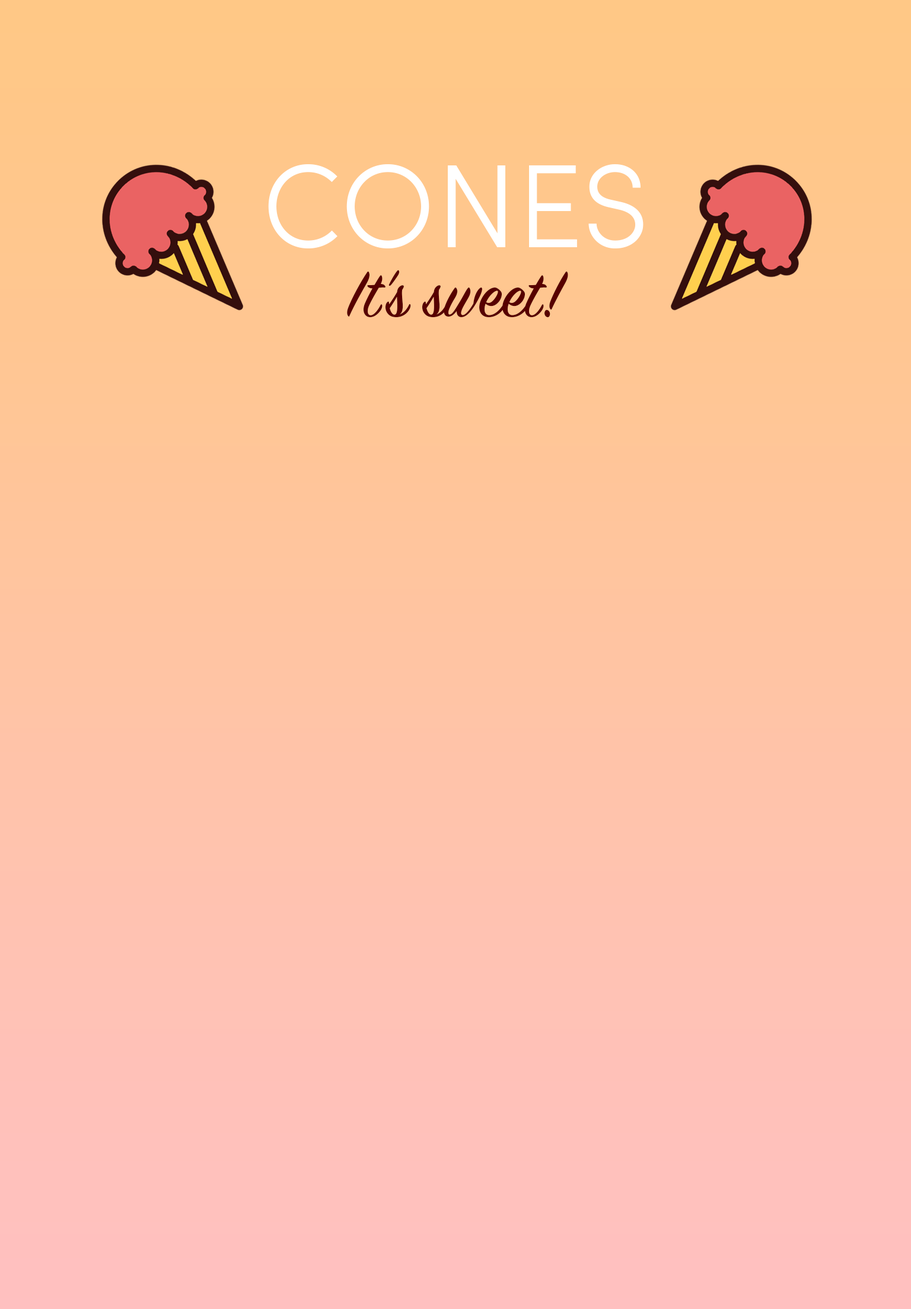
<style>
.page{position:relative;width:911px;height:1309px}
.page>*{position:absolute;margin:0}
.t1{font:118.6px "SofiaProLight";color:#ffffff}
.t2{font:71.2px "SignPainter-HouseScript";color:#570000}
</style>
<div class="page">
<p class="t1" style="left:268px;top:164px;width:375px;height:84px">CONES</p>
<p class="t2" style="left:347px;top:270px;width:221px;height:48px">It’s sweet!</p>
</div>
